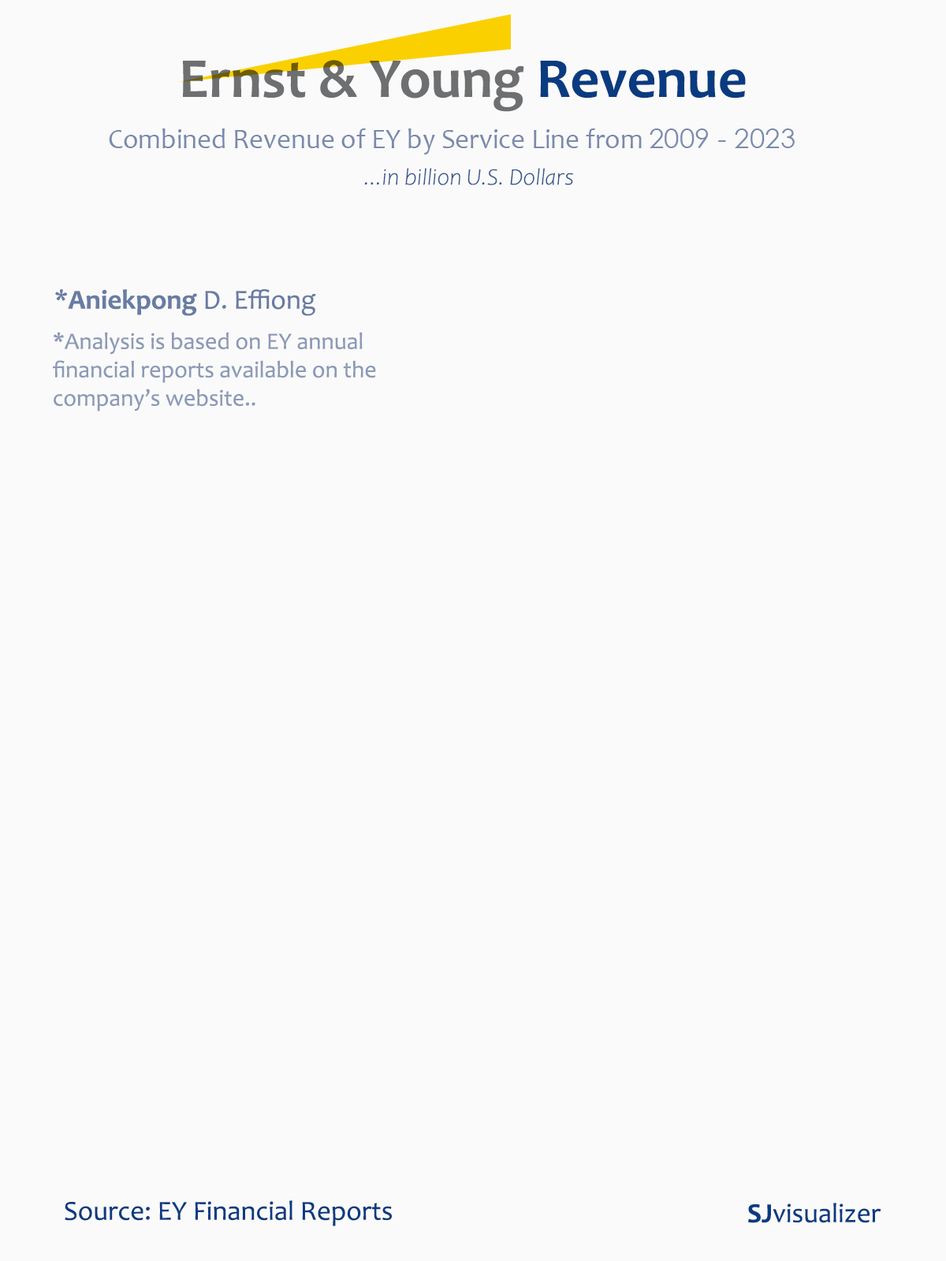
<style>
.page{position:relative;width:946px;height:1261px;background:#fafafa}
.page>*{position:absolute;margin:0}
.t1{font:56.7px "Candara-Bold";color:#6d6f71}
.t2{font:56.7px "Candara-Bold";color:#0a3b80}
.t3{font:27.6px "Candara";color:#7a8aad}
.t4{font:27.6px "CenturyGothic";color:#7a8aad}
.t5{font:23.6px "Candara-LightItalic";color:#39578f}
.t6{font:27.6px "Candara";color:#687ca4}
.t7{font:27.6px "Candara-Bold";color:#687ca4}
.t8{font:23.6px "Candara";color:#8c9ab7}
.t9{font:27.6px "Candara";color:#0a3b80}
.t10{font:27.6px "Candara-Bold";color:#0a3b80}
</style>
<div class="page">
<p class="t1" style="left:183px;top:60px;width:563px;height:52px">Ernst &amp; Young<span class="t2"> Revenue</span></p>
<p class="t3" style="left:109px;top:128px;width:685px;height:26px">Combined Revenue of EY by Service Line from <span class="t4">2009 - 2023</span></p>
<p class="t5" style="left:364px;top:168px;width:209px;height:17px">...in billion U.S. Dollars</p>
<p class="t6" style="left:55px;top:289px;width:261px;height:27px">*<span class="t7">Aniekpong</span> D. Effiong</p>
<p class="t8" style="left:53px;top:332px;width:323px;height:79px">*Analysis is based on EY annual<br>financial reports available on the<br>company’s website..</p>
<p class="t9" style="left:65px;top:1200px;width:327px;height:26px">Source: EY Financial Reports</p>
<p class="t9" style="left:748px;top:1203px;width:133px;height:20px"><span class="t10">SJ</span>visualizer</p>
</div>
